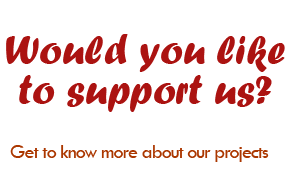
<style>
.page{position:relative;width:288px;height:175px;background:#ffffff}
.page>*{position:absolute;margin:0}
.t1{font:42px/40px "ForteMT";color:#ab1311}
.t2{font:20px "TwCenMT-Regular";letter-spacing:-0.05em;color:#ab3700}
</style>
<div class="page">
<p class="t1" style="left:6px;top:34px;width:279px;height:78px;text-align:center">Would you like<br>to support us?</p>
<p class="t2" style="left:10px;top:145px;width:259px;height:17px">Get to know more about our projects</p>
</div>
